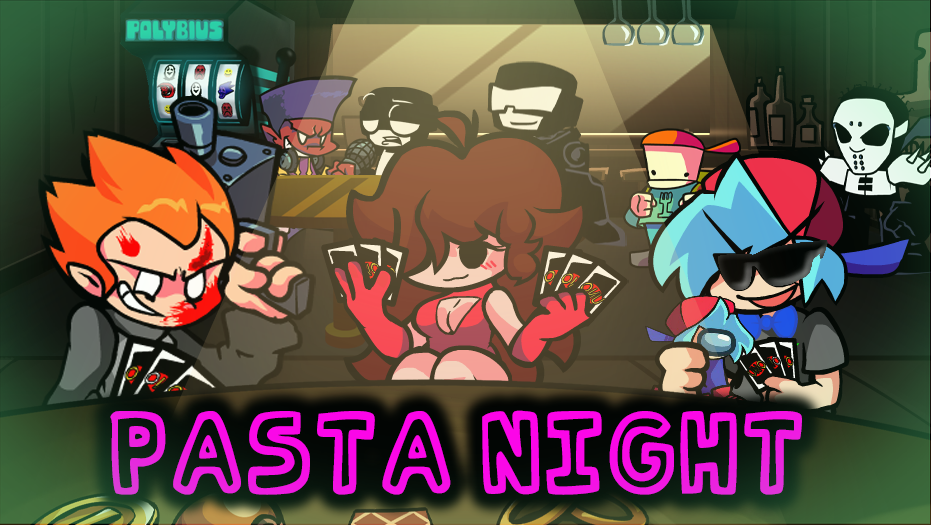
<style>
.page{position:relative;width:931px;height:525px}
.page>*{position:absolute;margin:0}
.t1{font:102.3px "PhantomMuff1.5";color:#ff00ea}
</style>
<div class="page">
<p class="t1" style="left:110px;top:410px;width:692px;height:85px">PASTA NIGHT</p>
</div>
